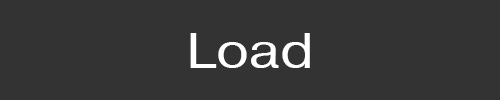
<style>
.page{position:relative;width:500px;height:100px;background:#333333}
.page>*{position:absolute;margin:0}
.t1{font:48px "Helvetica";color:#ffffff;scale:1.2 1}
</style>
<div class="page">
<p class="t1" style="left:190px;top:33px;width:120px;height:35px">Load</p>
</div>
